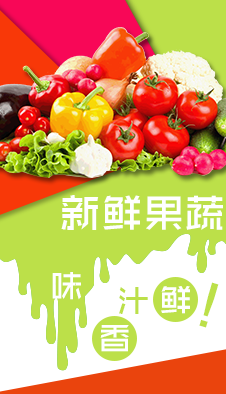
<style>
.page{position:relative;width:226px;height:394px;background:#bce049}
.page>*{position:absolute;margin:0}
.t1{font:41.7px "ZHSRXT2.0--GBK1-0";color:#ffffff}
.t2{font:33.3px "ZHSRXT2.0--GBK1-0";color:#ffffff}
.t3{font:33.3px "ZHSRXT2.0--GBK1-0";color:#bce049}
.t4{font:58.3px "ZHSRXT2.0--GBK1-0";color:#bce049}
</style>
<div class="page">
<p class="t1" style="left:61px;top:195px;width:162px;height:35px">新鲜果蔬</p>
<p class="t2" style="left:52px;top:272px;width:29px;height:28px">味</p>
<p class="t3" style="left:119px;top:287px;width:29px;height:27px">汁</p>
<p class="t2" style="left:161px;top:286px;width:29px;height:28px">鲜</p>
<p class="t4" style="left:199px;top:282px;width:20px;height:46px;rotate:16deg">!</p>
<p class="t2" style="left:100px;top:325px;width:29px;height:27px">香</p>
</div>
